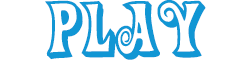
<style>
.page{position:relative;width:250px;height:75px;background:#ffffff}
.page>*{position:absolute;margin:0}
.t1{font:70px "ActionIs,ShadedJL";color:#1196d4;font-weight:bold}
</style>
<div class="page">
<p class="t1" style="left:45px;top:0px;width:161px;height:60px">PLAY</p>
</div>
